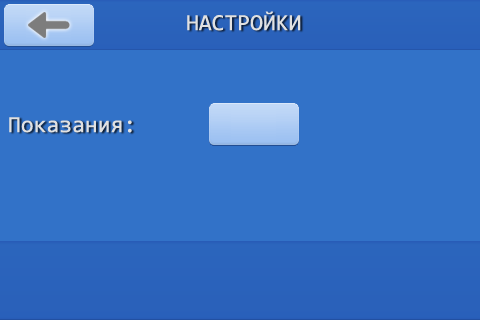
<style>
.page{position:relative;width:480px;height:320px;background:#3272c8}
.page>*{position:absolute;margin:0}
.t1{font:23.3px "Consolas";color:#e1e1e1}
</style>
<div class="page">
<p class="t1" style="left:187px;top:11px;width:114px;height:20px">НАСТРОЙКИ</p>
<p class="t1" style="left:9px;top:117px;width:123px;height:16px">Показания:</p>
</div>
